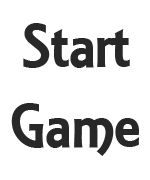
<style>
.page{position:relative;width:150px;height:180px;background:#ffffff}
.page>*{position:absolute;margin:0}
.t1{font:66.7px "ARESSENCE";color:#282828}
</style>
<div class="page">
<p class="t1" style="left:11px;top:23px;width:128px;height:133px;text-align:center">Start<br>Game</p>
</div>
